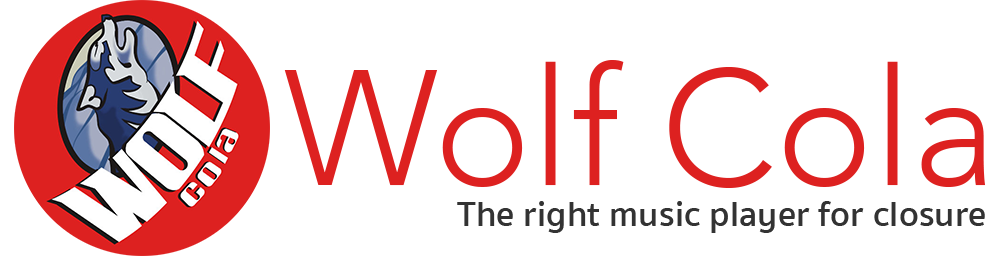
<style>
.page{position:relative;width:1000px;height:256px;background:#ffffff}
.page>*{position:absolute;margin:0}
.t1{font:163px "Avenir-Light";color:#dd2120}
.t2{font:36.2px "SukhumvitSet-SemiBold";color:#333333}
</style>
<div class="page">
<p class="t1" style="left:284px;top:60px;width:702px;height:128px">Wolf Cola</p>
<p class="t2" style="left:457px;top:201px;width:528px;height:32px">The right music player for closure</p>
</div>
